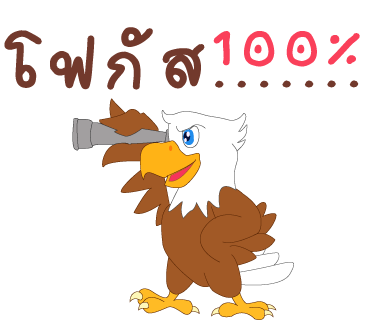
<style>
.page{position:relative;width:370px;height:320px;background:#ffffff}
.page>*{position:absolute;margin:0}
.t1{font:107px "2005_iannnnnMTV";letter-spacing:0.075em;color:#72392c;scale:1.06 1}
.t2{font:99px "2005_iannnnnMTV";letter-spacing:0.075em;color:#fa405a;scale:1.06 1}
</style>
<div class="page">
<p class="t1" style="left:4px;top:27px;width:355px;height:63px">โฟกัส.......</p>
<p class="t2" style="left:213px;top:31px;width:147px;height:36px">100%</p>
</div>
